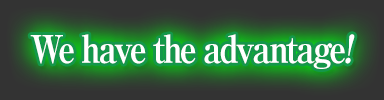
<style>
.page{position:relative;width:384px;height:100px;background:#333333}
.page>*{position:absolute;margin:0}
.t1{font:38px "RyuminPro-ExBold";letter-spacing:-0.08em;color:#ffffff;scale:0.9 1}
.t2{font:38px "RyuminPro-ExBold";letter-spacing:-0.08em;color:#ffffff;font-style:italic;scale:0.9 1}
</style>
<div class="page">
<p class="t1" style="left:30px;top:34px;width:325px;height:35px">We have the advantage<span class="t2">!</span></p>
</div>
